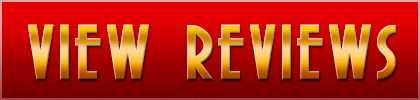
<style>
.page{position:relative;width:420px;height:100px}
.page>*{position:absolute;margin:0}
.t1{font:116.7px "SierraMadre";font-weight:bold}
</style>
<div class="page">
<p class="t1" style="left:28px;top:24px;width:368px;height:55px">VIEW REVIEWS</p>
</div>
